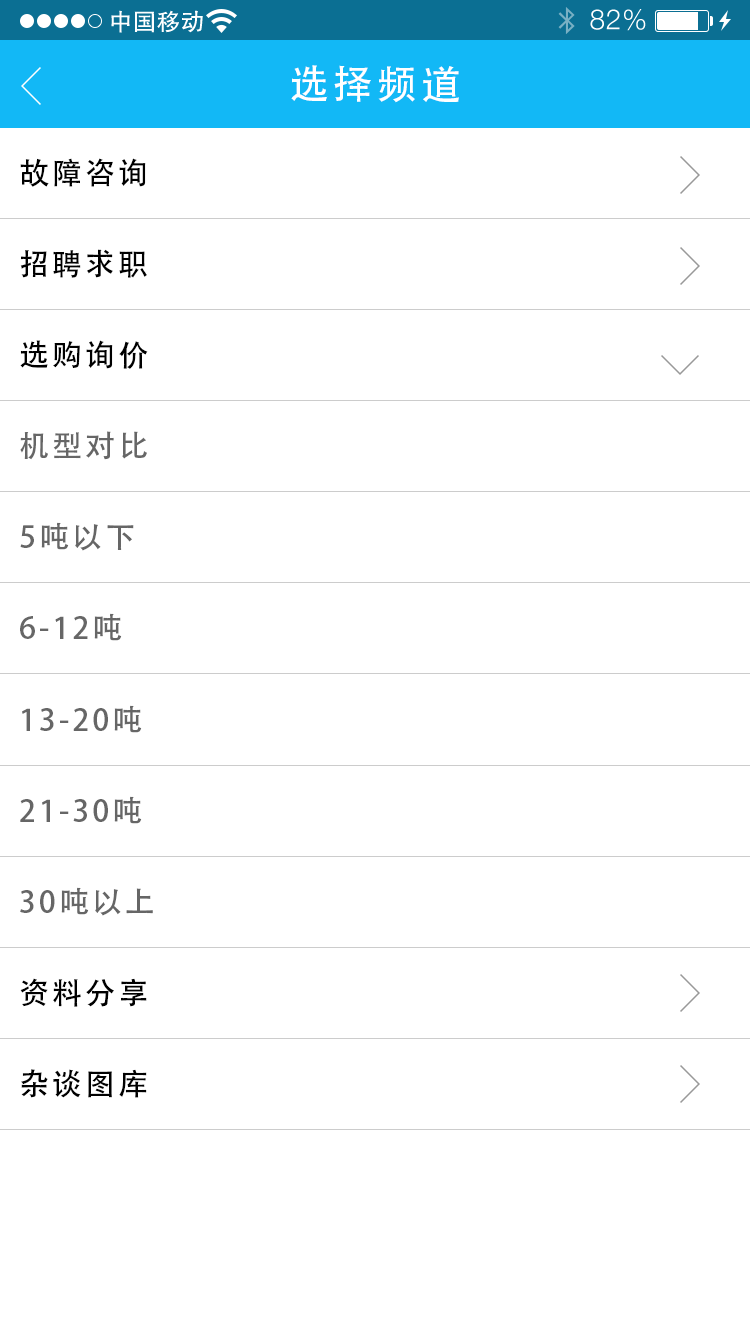
<style>
.page{position:relative;width:750px;height:1334px;background:#ffffff}
.page>*{position:absolute;margin:0}
.t1{font:40px "AdobeHeitiStd-Regular";letter-spacing:0.104em;color:#ffffff}
.t2{font:30px "AdobeHeitiStd-Regular";letter-spacing:0.104em;color:#000000}
.t3{font:30px "AdobeHeitiStd-Regular";letter-spacing:0.104em;color:#666666}
</style>
<div class="page">
<p class="t1" style="left:291px;top:65px;width:168px;height:38px">选择频道</p>
<p class="t2" style="left:20px;top:158px;width:126px;height:29px">故障咨询</p>
<p class="t2" style="left:20px;top:249px;width:127px;height:29px">招聘求职</p>
<p class="t2" style="left:20px;top:340px;width:128px;height:29px">选购询价</p>
<p class="t3" style="left:20px;top:431px;width:127px;height:29px">机型对比</p>
<p class="t3" style="left:20px;top:522px;width:114px;height:29px">5吨以下</p>
<p class="t3" style="left:20px;top:613px;width:102px;height:28px">6-12吨</p>
<p class="t3" style="left:22px;top:705px;width:120px;height:28px">13-20吨</p>
<p class="t3" style="left:20px;top:796px;width:122px;height:28px">21-30吨</p>
<p class="t3" style="left:20px;top:887px;width:133px;height:29px">30吨以上</p>
<p class="t2" style="left:20px;top:978px;width:127px;height:29px">资料分享</p>
<p class="t2" style="left:21px;top:1069px;width:126px;height:29px">杂谈图库</p>
</div>
